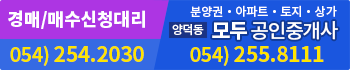
<style>
.page{position:relative;width:350px;height:70px;background:#1a56df}
.page>*{position:absolute;margin:0}
.t1{font:12px "NotoSansCJKkr-Medium";color:#ffffff}
.t2{font:18px "NotoSansCJKkr-Black";color:#ffffff}
.t3{font:12px "NotoSansCJKkr-Medium";letter-spacing:-0.05em;color:#ffffff}
.t4{font:20px "NotoSansCJKkr-Medium";letter-spacing:-0.05em;color:#ffffff}
.t5{font:20px "NotoSansCJKkr-Black";letter-spacing:-0.05em;color:#ffffff}
.t6{font:21.4px "NotoSansCJKkr-Bold";letter-spacing:-0.025em;color:#ffe400}
.t7{font:19.6px "NotoSansCJKkr-Bold";letter-spacing:-0.025em;color:#ffe400}
</style>
<div class="page">
<p class="t1" style="left:190px;top:5px;width:147px;height:12px">분양권・아파트・토지・상가</p>
<p class="t2" style="left:8px;top:10px;width:137px;height:19px">경매/매수신청대리</p>
<p class="t3" style="left:172px;top:24px;width:32px;height:12px">양덕동</p>
<p class="t4" style="left:212px;top:21px;width:126px;height:19px"><span class="t5">모두 </span>공인중개사</p>
<p class="t6" style="left:10px;top:45px;width:134px;height:21px"><span class="t7">054) </span>254.2030</p>
<p class="t6" style="left:190px;top:45px;width:134px;height:21px"><span class="t7">054) </span>255.8111</p>
</div>
